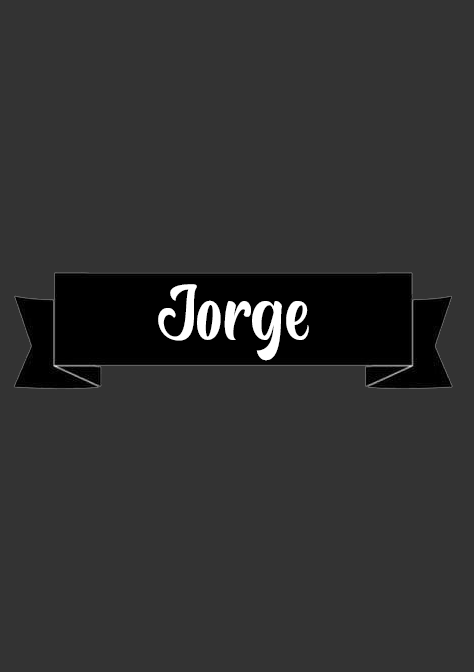
<style>
.page{position:relative;width:474px;height:672px;background:#333333}
.page>*{position:absolute;margin:0}
.t1{font:48.3px "Boughies-Demo";color:#ffffff}
</style>
<div class="page">
<p class="t1" style="left:158px;top:284px;width:151px;height:77px">Jorge</p>
</div>
